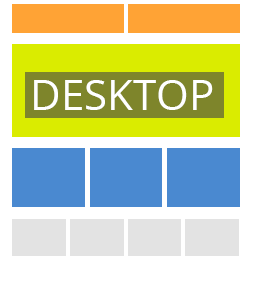
<style>
.page{position:relative;width:253px;height:290px;background:#ffffff}
.page>*{position:absolute;margin:0}
.t1{font:42px "OpenSans";color:#ffffff}
</style>
<div class="page">
<p class="t1" style="left:34px;top:80px;width:179px;height:30px">DESKTOP</p>
</div>
